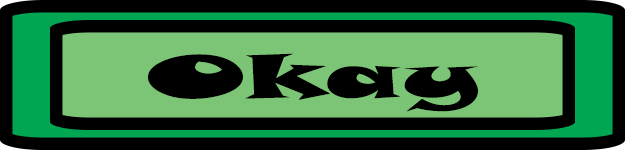
<style>
.page{position:relative;width:625px;height:150px;background:#000000}
.page>*{position:absolute;margin:0}
.t1{font:60px "SnapITC-Regular";color:#000000;scale:2 1}
</style>
<div class="page">
<p class="t1" style="left:148px;top:53px;width:330px;height:59px">Okay</p>
</div>
